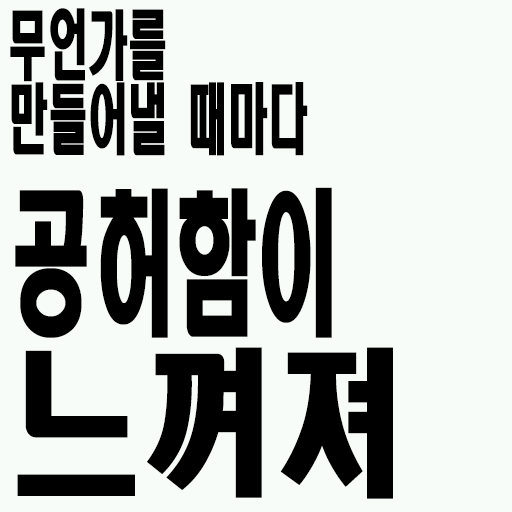
<style>
.page{position:relative;width:512px;height:512px;background:#f8fcf8}
.page>*{position:absolute;margin:0}
.t1{font:76px/74px "HeadlineR-HM";color:#000000;scale:0.53 1}
.t2{font:155.8px/160px "HeadlineR-HM";color:#000000;scale:0.53 1}
.t3{font:155.8px/160px "HeadlineR-HM";color:#000000;scale:0.84 1}
</style>
<div class="page">
<p class="t1" style="left:10px;top:8px;width:298px;height:148px">무언가를 만들어낼 때마다</p>
<p class="t2" style="left:15px;top:187px;width:378px;height:312px">공허함이<br><span class="t3">느껴져</span></p>
</div>
